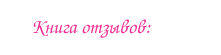
<style>
.page{position:relative;width:221px;height:55px;background:#ffffff}
.page>*{position:absolute;margin:0}
.t1{font:20px "ZapfChanceryCTT";color:#f22c95}
</style>
<div class="page">
<p class="t1" style="left:32px;top:19px;width:119px;height:19px">Книга отзывов:</p>
</div>
